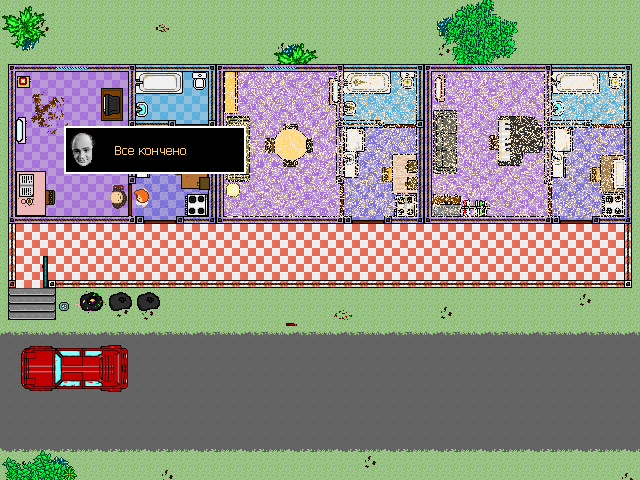
<style>
.page{position:relative;width:640px;height:480px}
.page>*{position:absolute;margin:0}
.t1{font:12px "Tahoma";color:#ffcd59}
</style>
<div class="page">
<p class="t1" style="left:115px;top:146px;width:71px;height:9px">Все кончено</p>
</div>
